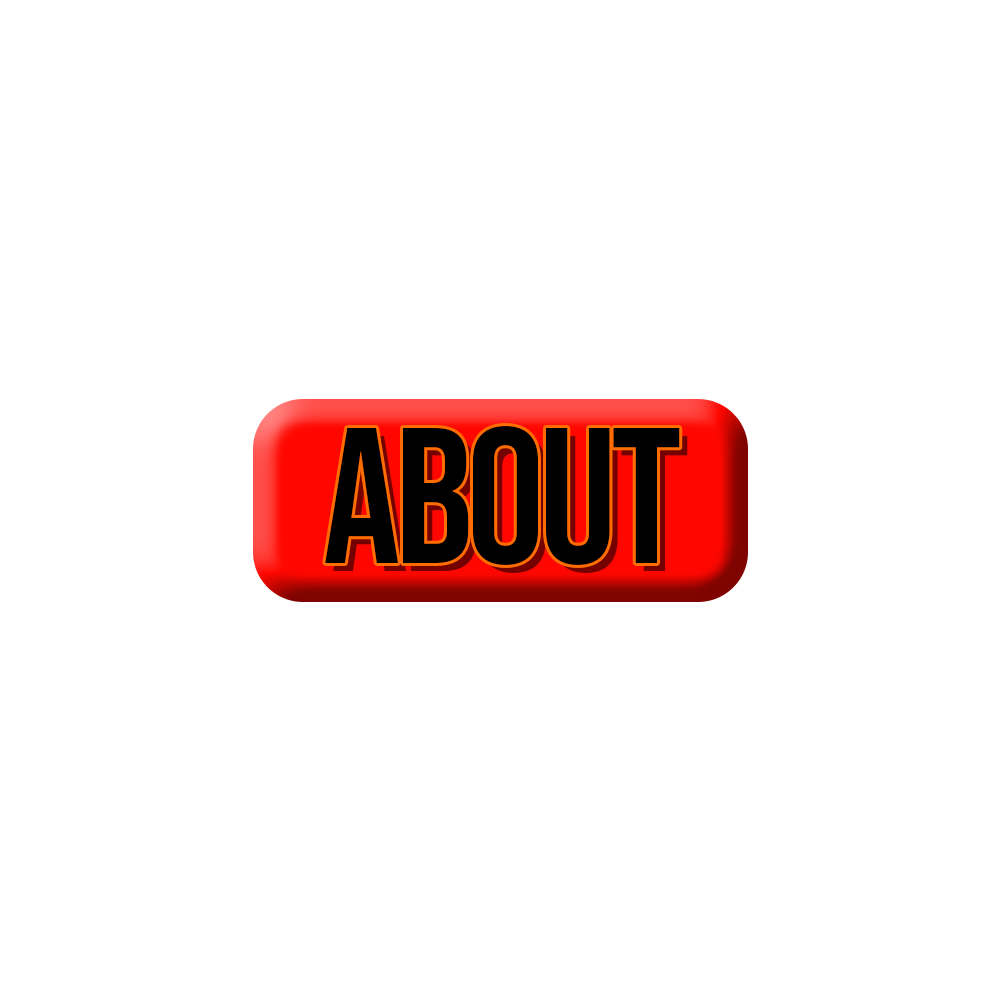
<style>
.page{position:relative;width:1000px;height:1000px;background:#ffffff}
.page>*{position:absolute;margin:0}
.t1{font:193.1px "BebasNeue-Regular";letter-spacing:-0.03em;color:#000000}
</style>
<div class="page">
<p class="t1" style="left:325px;top:426px;width:355px;height:139px">ABOUT</p>
</div>
